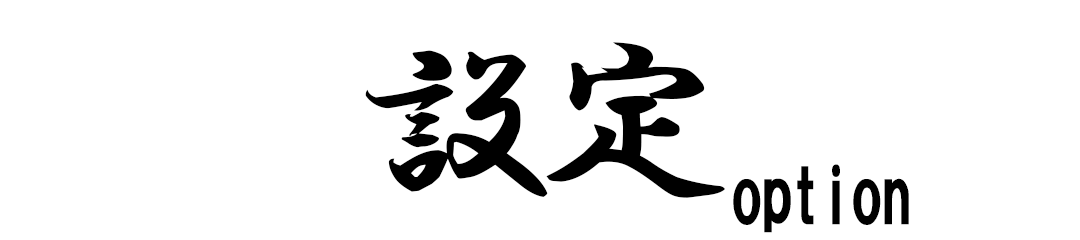
<style>
.page{position:relative;width:1080px;height:240px;background:#ffffff}
.page>*{position:absolute;margin:0}
.t1{font:195.8px "HGSGyoshotai";letter-spacing:-0.1em;color:#000000}
.t2{font:75px "HGSoeiKakugothicUB";letter-spacing:-0.1em;color:#000000}
</style>
<div class="page">
<p class="t1" style="left:365px;top:42px;width:360px;height:156px">設定</p>
<p class="t2" style="left:733px;top:164px;width:176px;height:69px">option</p>
</div>
